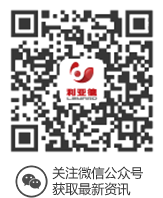
<style>
.page{position:relative;width:163px;height:198px;background:#ffffff}
.page>*{position:absolute;margin:0}
.t1{font:13px/16px "MicrosoftYaHei";color:#363636}
</style>
<div class="page">
<p class="t1" style="left:52px;top:166px;width:91px;height:30px">关注微信公众号<br>获取最新资讯</p>
</div>
